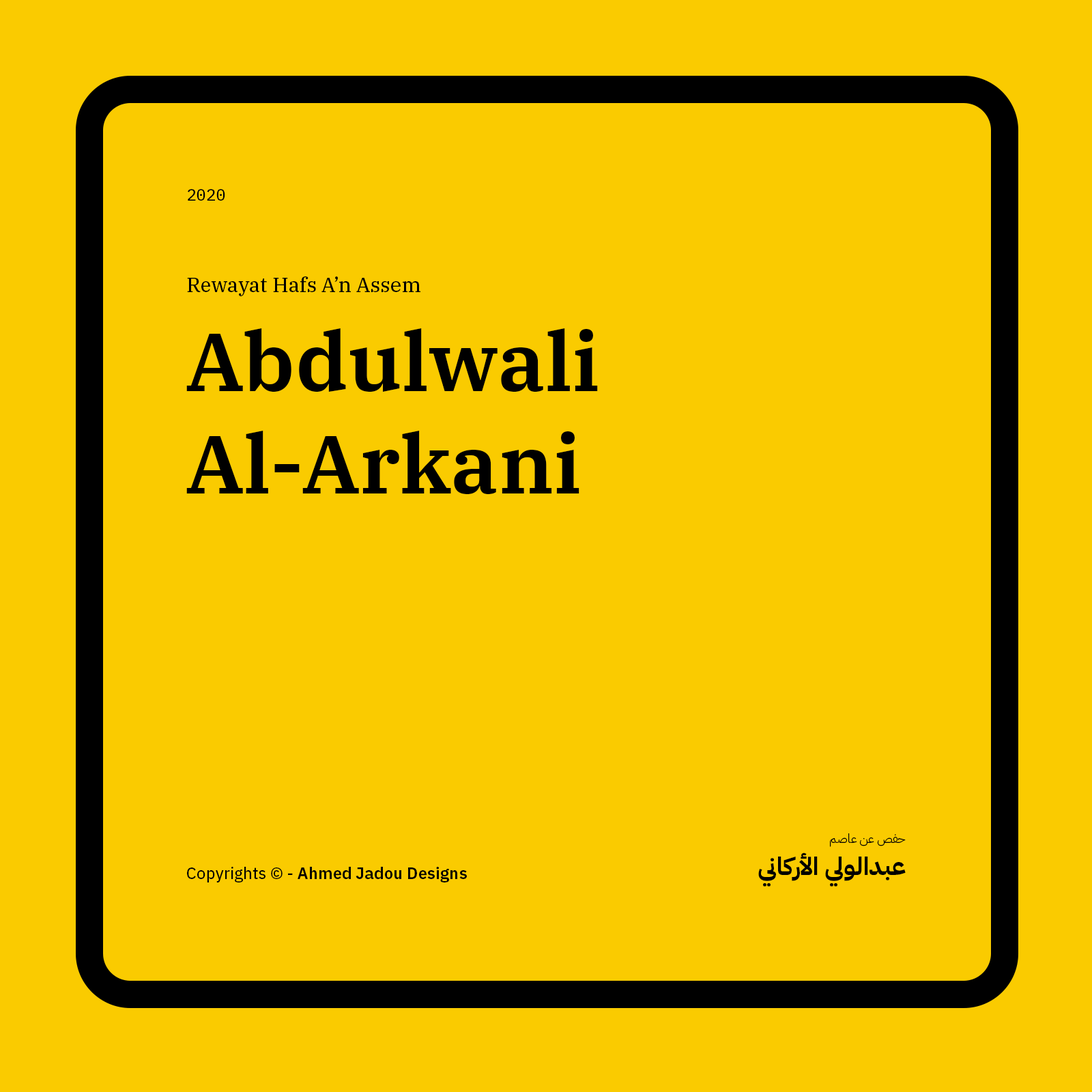
<style>
.page{position:relative;width:1092px;height:1092px;background:#facb00}
.page>*{position:absolute;margin:0}
.t1{font:16.4px "IBMPlexMono-Text";color:#000000}
.t2{font:20.5px "IBMPlexSerif-Text";color:#000000}
.t3{font:81.9px/102.7px "IBMPlexSerif-SemiBold";color:#000000}
.t4{font:12.3px "IBMPlexArabic-Light";color:#000000}
.t5{font:24.6px "IBMPlexArabic-Bold";color:#000000}
.t6{font:16.4px "IBMPlexSans-SemiBold";color:#000000}
.t7{font:16.4px "IBMPlexSans-Text";color:#000000}
</style>
<div class="page">
<p class="t1" style="left:188px;top:189px;width:37px;height:12px">2020</p>
<p class="t2" style="left:187px;top:276px;width:233px;height:20px">Rewayat Hafs A’n Assem</p>
<p class="t3" style="left:186px;top:328px;width:412px;height:166px">Abdulwali Al-Arkani</p>
<p class="t4" style="left:830px;top:833px;width:76px;height:14px">حفص عن عاصم</p>
<p class="t5" style="left:758px;top:852px;width:148px;height:35px">عبدالولي الأركاني</p>
<p class="t6" style="left:187px;top:867px;width:280px;height:15px"><span class="t7">Copyrights © - </span>Ahmed Jadou Designs</p>
</div>
